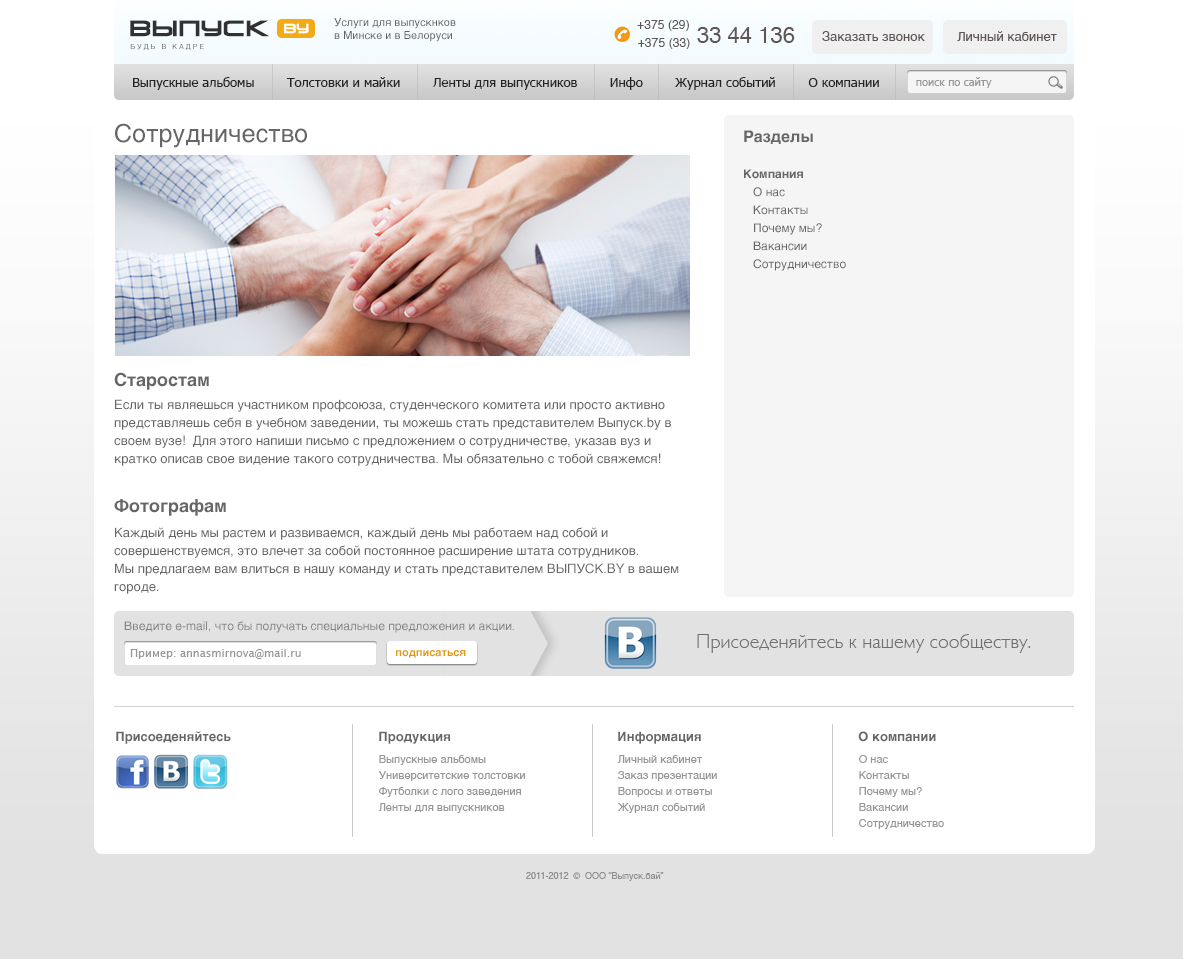
<style>
.page{position:relative;width:1183px;height:959px;background:#ffffff}
.page>*{position:absolute;margin:0}
.t1{font:21px "VenusRisingCyrillic";letter-spacing:0.01em;color:#313131;font-weight:bold}
.t2{font:12.6px "VenusRisingCyrillic";letter-spacing:0.01em;color:#ffffff;font-weight:bold}
.t3{font:11px "Helvetica";color:#616161}
.t4{font:12px "Helvetica";letter-spacing:0.01em;color:#5f5555}
.t5{font:22px "Helvetica";color:#5f5555}
.t6{font:13px "Helvetica";color:#5f5555}
.t7{font:7px "Helvetica";letter-spacing:0.3em;color:#6d6d6d;text-transform:uppercase}
.t8{font:13px "Tahoma";color:#242424}
.t9{font:11px "Tahoma";color:#979999}
.t10{font:25px "Helvetica";color:#666666}
.t11{font:12px/18px "Helvetica";color:#666666}
.t12{font:16px "Helvetica-Bold";color:#666666}
.t13{font:12px/36px "Helvetica-Bold";color:#666666}
.t14{font:18px "Helvetica-Bold";color:#666666}
.t15{font:13px/18px "Helvetica";color:#666666}
.t16{font:12px "Helvetica";color:#848484}
.t17{font:20px "GillSans-Light";color:#6f6f6f}
.t18{font:11px "LucidaGrande";color:#979797}
.t19{font:11px "Helvetica-Bold";color:#e09b0e}
.t20{font:13px "Helvetica-Bold";color:#666666}
.t21{font:11px/16px "Helvetica";color:#979797}
.t22{font:9px "Helvetica";color:#909090}
</style>
<div class="page">
<p class="t1" style="left:130px;top:20px;width:139px;height:17px">ВЫпуск</p>
<p class="t2" style="left:284px;top:23px;width:25px;height:11px">by</p>
<p class="t3" style="left:334px;top:18px;width:122px;height:24px">Услуги для выпускнков<br>в Минске и в Белоруси</p>
<p class="t4" style="left:637px;top:20px;width:52px;height:11px">+375 (29)</p>
<p class="t5" style="left:697px;top:27px;width:98px;height:16px">33 44 136</p>
<p class="t4" style="left:638px;top:38px;width:52px;height:11px">+375 (33)</p>
<p class="t6" style="left:822px;top:31px;width:235px;height:10px">Заказать звонок         Личный кабинет</p>
<p class="t7" style="left:130px;top:44px;width:74px;height:6px">будь в кадре</p>
<p class="t8" style="left:133px;top:77px;width:746px;height:13px">Выпускные альбомы        Толстовки и майки        Ленты для выпускников        Инфо        Журнал событий        О компании</p>
<p class="t9" style="left:916px;top:77px;width:76px;height:11px">поиск по сайту</p>
<p class="t10" style="left:115px;top:123px;width:192px;height:25px">Сотрудничество</p>
<p class="t11" style="left:744px;top:130px;width:102px;height:141px"><span class="t12">Разделы<br></span><span class="t13">Компания<br></span>   О нас<br>   Контакты<br>   Почему мы? <br>   Вакансии<br>   Сотрудничество</p>
<p class="t14" style="left:114px;top:372px;width:95px;height:18px">Старостам</p>
<p class="t15" style="left:114px;top:399px;width:557px;height:67px">Если ты являешься участником профсоюза, студенческого комитета или просто активно представляешь себя в учебном заведении, ты можешь стать представителем Выпуск.by в своем вузе!  Для этого напиши письмо с предложением о сотрудничестве, указав вуз и кратко описав свое видение такого сотрудничества. Мы обязательно с тобой свяжемся!</p>
<p class="t14" style="left:114px;top:499px;width:112px;height:17px">Фотографам</p>
<p class="t15" style="left:114px;top:527px;width:565px;height:67px">Каждый день мы растем и развиваемся, каждый день мы работаем над собой и совершенствуемся, это влечет за собой постоянное расширение штата сотрудников.<br>Мы предлагаем вам влиться в нашу команду и стать представителем ВЫПУСК.BY в вашем городе.</p>
<p class="t16" style="left:124px;top:621px;width:390px;height:12px">Введите e-mail, что бы получать специальные предложения и акции.</p>
<p class="t17" style="left:697px;top:634px;width:333px;height:19px">Присоеденяйтесь к нашему сообществу.</p>
<p class="t18" style="left:130px;top:649px;width:171px;height:10px">Пример: annasmirnova@mail.ru</p>
<p class="t19" style="left:396px;top:650px;width:70px;height:8px">подписаться</p>
<p class="t20" style="left:116px;top:731px;width:115px;height:13px">Присоеденяйтесь</p>
<p class="t20" style="left:379px;top:731px;width:71px;height:13px">Продукция</p>
<p class="t20" style="left:618px;top:731px;width:83px;height:13px">Информация</p>
<p class="t20" style="left:858px;top:731px;width:78px;height:11px">О компании</p>
<p class="t21" style="left:378px;top:755px;width:147px;height:58px">Выпускные альбомы<br>Университетские толстовки<br>Футболки с лого заведения<br>Ленты для выпускников</p>
<p class="t21" style="left:617px;top:755px;width:100px;height:58px">Личный кабинет<br>Заказ презентации<br>Вопросы и ответы<br>Журнал событий</p>
<p class="t21" style="left:859px;top:755px;width:85px;height:74px">О нас<br>Контакты<br>Почему мы? <br>Вакансии<br>Сотрудничество</p>
<p class="t22" style="left:526px;top:872px;width:138px;height:9px">2011-2012  ©  ООО “Выпуск.бай”</p>
</div>
